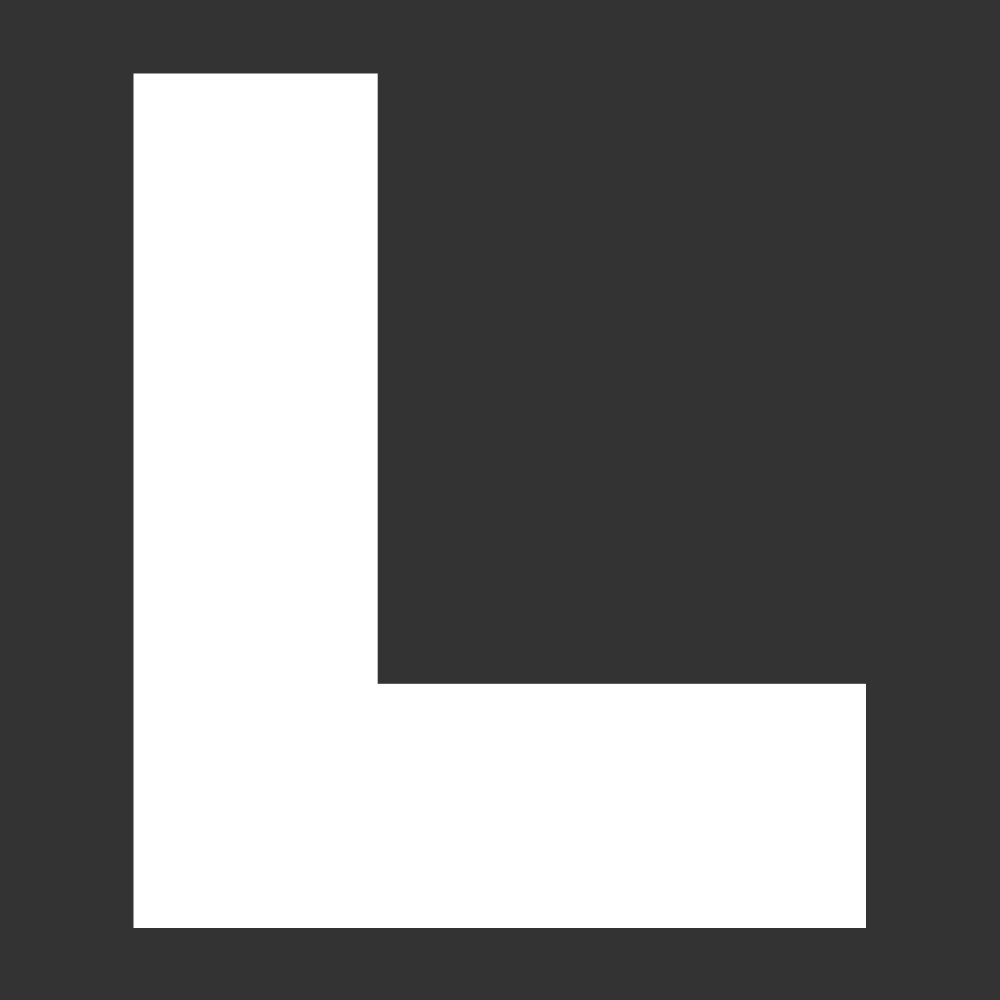
<style>
.page{position:relative;width:1000px;height:1000px;background:#333333}
.page>*{position:absolute;margin:0}
.t1{font:1250px "NeonOverdrive";letter-spacing:0.01em;color:#ffffff}
</style>
<div class="page">
<p class="t1" style="left:133px;top:73px;width:733px;height:855px">l</p>
</div>
